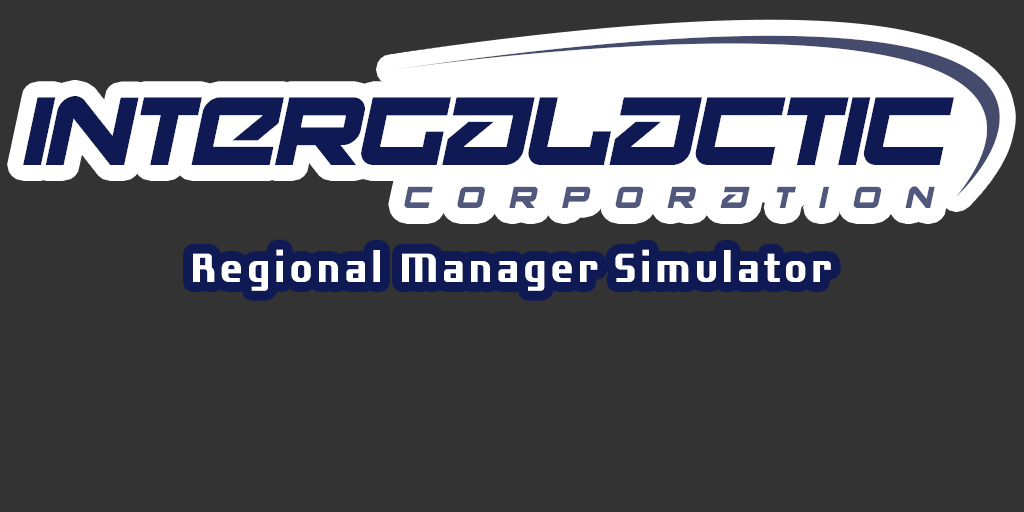
<style>
.page{position:relative;width:1024px;height:512px;background:#333333}
.page>*{position:absolute;margin:0}
.t1{font:95px "Onky-Italic";color:#0f1a54}
.t2{font:30px "Onky-Italic";letter-spacing:0.88em;color:#51587d}
.t3{font:44px "Laconic-Bold";letter-spacing:0.08em;color:#ffffff}
</style>
<div class="page">
<p class="t1" style="left:23px;top:96px;width:931px;height:69px">Intergalactic</p>
<p class="t2" style="left:404px;top:186px;width:531px;height:22px">Corporation</p>
<p class="t3" style="left:193px;top:249px;width:638px;height:42px">Regional Manager Simulator</p>
</div>
